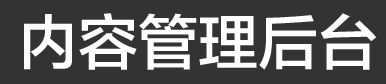
<style>
.page{position:relative;width:386px;height:84px;background:#333333}
.page>*{position:absolute;margin:0}
.t1{font:60px "FZLTZHK--GBK1-0";color:#fefefe}
</style>
<div class="page">
<p class="t1" style="left:24px;top:13px;width:353px;height:57px">内容管理后台</p>
</div>
